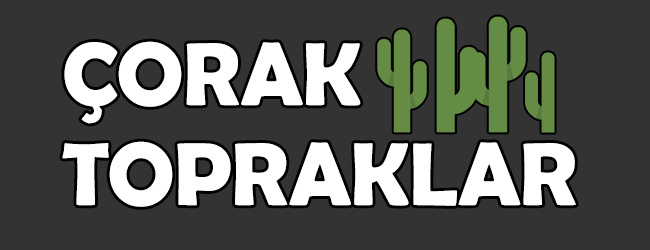
<style>
.page{position:relative;width:650px;height:250px;background:#333333}
.page>*{position:absolute;margin:0}
.t1{font:90px/100px "BerlinSansFBDemi-Bold";color:#ffffff}
</style>
<div class="page">
<p class="t1" style="left:62px;top:41px;width:514px;height:166px">ÇORAK<br>TOPRAKLAR</p>
</div>
